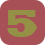
<style>
.page{position:relative;width:45px;height:45px;background:#a75157}
.page>*{position:absolute;margin:0}
.t1{font:50px "Saddlebag-Black";color:#949146}
</style>
<div class="page">
<p class="t1" style="left:7px;top:10px;width:30px;height:27px">5</p>
</div>
